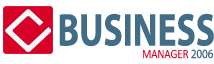
<style>
.page{position:relative;width:214px;height:64px;background:#ffffff}
.page>*{position:absolute;margin:0}
.t1{font:46px "MyriadPro-Bold";color:#416e86;scale:0.78 1}
.t2{font:12.6px "Calibri-Light";color:#d70026;scale:0.87 1}
.t3{font:12.6px "MyriadPro-Regular";color:#416e86;scale:0.87 1}
</style>
<div class="page">
<p class="t1" style="left:59px;top:13px;width:155px;height:34px">BUSINESS</p>
<p class="t2" style="left:143px;top:49px;width:70px;height:10px">MANAGER <span class="t3">2006</span></p>
</div>
